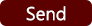
<style>
.page{position:relative;width:92px;height:26px;background:#5d0000}
.page>*{position:absolute;margin:0}
.t1{font:17.2px "MicrosoftJhengHeiUIRegular";color:#ffffff}
</style>
<div class="page">
<p class="t1" style="left:26px;top:6px;width:40px;height:15px">Send</p>
</div>
